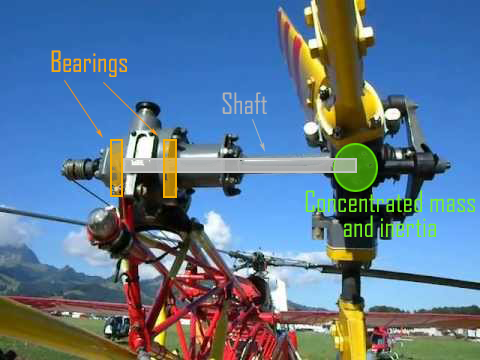
<style>
.page{position:relative;width:480px;height:360px}
.page>*{position:absolute;margin:0}
.t1{font:48px "AgencyFB-Reg";color:#f4ad03}
.t2{font:48px "AgencyFB-Reg";color:#b1b4b4}
.t3{font:48px "AgencyFB-Reg";color:#76ef24}
</style>
<div class="page">
<p class="t1" style="left:51px;top:50px;width:76px;height:27px">Bearings</p>
<p class="t2" style="left:222px;top:92px;width:45px;height:22px">Shaft</p>
<p class="t3" style="left:305px;top:190px;width:170px;height:22px">Concentrated mass</p>
<p class="t3" style="left:344px;top:215px;width:92px;height:22px">and inertia</p>
</div>
